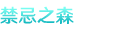
<style>
.page{position:relative;width:128px;height:32px;background:#ffffff}
.page>*{position:absolute;margin:0}
.t1{font:18.7px "HYWenHei-FEW";letter-spacing:0.025em}
</style>
<div class="page">
<p class="t1" style="left:0px;top:6px;width:74px;height:18px">禁忌之森</p>
</div>
